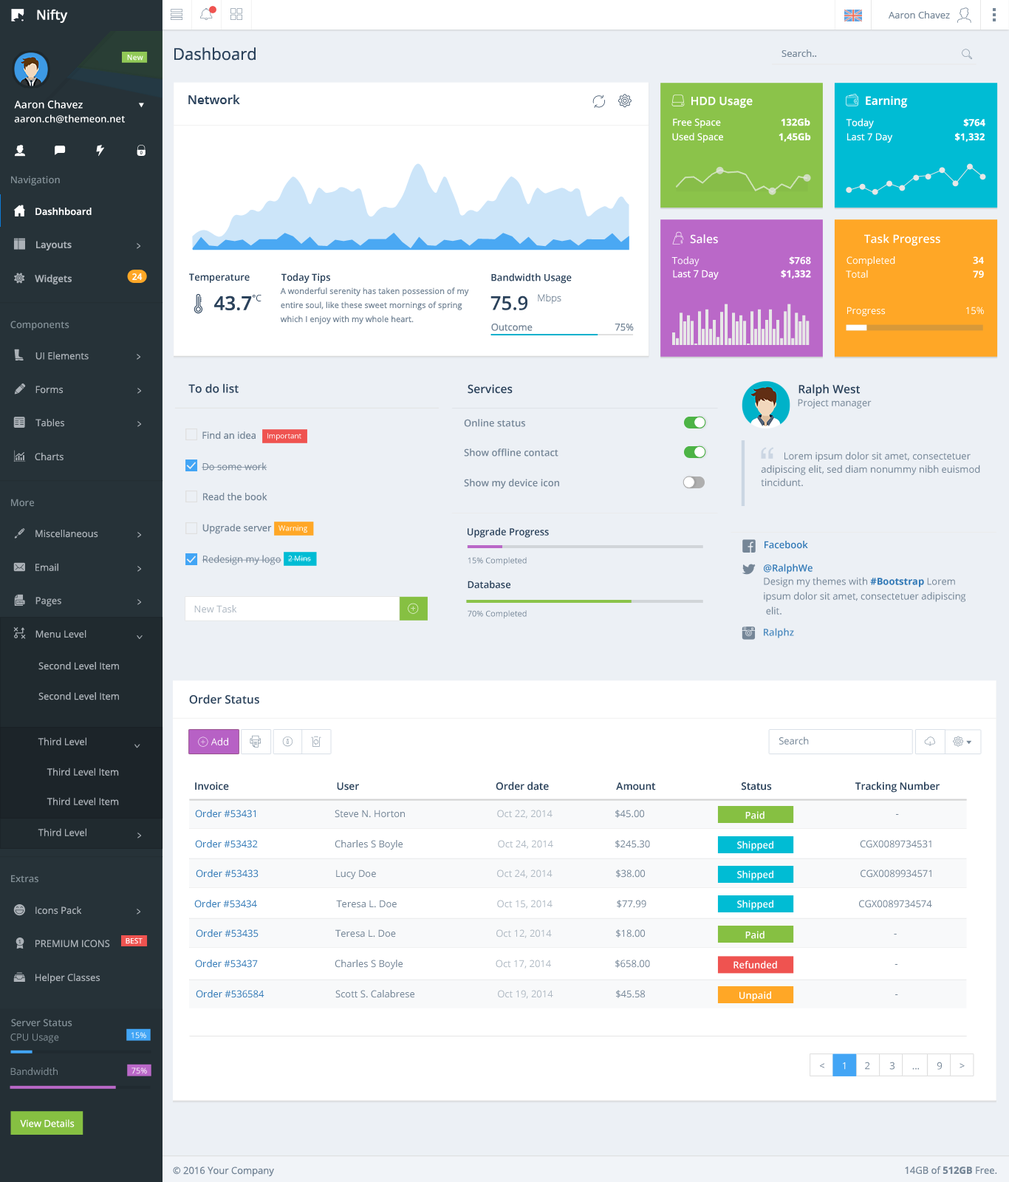
<style>
.page{position:relative;width:1009px;height:1182px;background:#ffffff}
.page>*{position:absolute;margin:0}
.t1{font:13.3px "OpenSans-Semibold";color:#ffffff}
.t2{font:9.6px "OpenSans";color:#758697}
.t3{font:16.3px "OpenSans";color:#2b425b}
.t4{font:7.4px "OpenSans-Semibold";color:#ffffff}
.t5{font:10.3px "OpenSans-Semibold";color:#ffffff}
.t6{font:12.6px "OpenSans-Semibold";color:#2b425b}
.t7{font:11.5px "OpenSans-Semibold";color:#ffffff}
.t8{font:9.6px "OpenSans-Semibold";letter-spacing:0.007em;color:#ffffff}
.t9{font:9.6px "OpenSans";color:#ffffff}
.t10{font:9.6px "OpenSans-Bold";color:#ffffff}
.t11{font:9.6px "OpenSans-Semibold";color:#818e95}
.t12{font:9.6px "OpenSans-Semibold";color:#ffffff}
.t13{font:9.6px "OpenSans-Semibold";color:#abb1b7}
.t14{font:8.9px "OpenSans-Semibold";color:#ffffff}
.t15{font:9.6px "OpenSans-Semibold";color:#2b425b}
.t16{font:8.2px/14px "OpenSans";letter-spacing:0.006em;color:#758697}
.t17{font:9.6px "OpenSans-Light";color:#758697}
.t18{font:19.2px "OpenSans-Semibold";color:#2b425b}
.t19{font:8.9px "OpenSans-Light";color:#2b425b}
.t20{font:9.6px "OpenSans";color:#abb1b7}
.t21{font:11.5px "OpenSans-Semibold";color:#2b425b}
.t22{font:9.6px "OpenSans-Semibold";color:#758697}
.t23{font:7.4px "OpenSans";color:#ffffff}
.t24{font:9.6px/13.3px "OpenSans";color:#758697}
.t25{font:9.6px "OpenSans-Semibold";color:#337ab7}
.t26{font:7.4px "OpenSans"}
.t27{font:8.1px "OpenSans";color:#758697}
.t28{font:9.6px/14.8px "OpenSans";color:#758697}
.t29{font:9.6px/14.8px "OpenSans-Bold";color:#337ab7}
.t30{font:9.6px "OpenSans";color:#afb9c3}
.t31{font:9.6px "OpenSans-Semibold";color:#4d8bbf}
.t32{font:10.1px "OpenSans-Semibold";color:#2b425b}
.t33{font:9.6px "OpenSans";color:#337ab7}
.t34{font:9.6px "OpenSans";color:#818e95}
.t35{font:8.1px "OpenSans";color:#ffffff}
.t36{font:9.6px "OpenSans";letter-spacing:-0.005em;color:#758697}
.t37{font:9.6px "OpenSans";letter-spacing:-0.005em;color:#ffffff}
.t38{font:9.6px "OpenSans-Bold";color:#758697}
</style>
<div class="page">
<p class="t1" style="left:37px;top:9px;width:31px;height:14px">Nifty</p>
<p class="t2" style="left:889px;top:11px;width:61px;height:7px">Aaron Chavez</p>
<p class="t3" style="left:174px;top:47px;width:82px;height:14px">Dashboard</p>
<p class="t2" style="left:781px;top:49px;width:36px;height:8px">Search..</p>
<p class="t4" style="left:127px;top:55px;width:16px;height:6px">New</p>
<p class="t5" style="left:14px;top:100px;width:69px;height:9px">Aaron Chavez</p>
<p class="t6" style="left:188px;top:95px;width:52px;height:9px">Network</p>
<p class="t7" style="left:691px;top:97px;width:62px;height:11px">HDD Usage</p>
<p class="t7" style="left:866px;top:96px;width:42px;height:12px">Earning</p>
<p class="t8" style="left:14px;top:114px;width:111px;height:9px">aaron.ch@themeon.net</p>
<p class="t9" style="left:673px;top:118px;width:137px;height:11px">Free Space                        <span class="t10">132Gb</span></p>
<p class="t9" style="left:846px;top:118px;width:139px;height:11px">Today                                    <span class="t10">$764</span></p>
<p class="t9" style="left:672px;top:132px;width:139px;height:11px">Used Space                      <span class="t10">1,45Gb</span></p>
<p class="t9" style="left:847px;top:132px;width:138px;height:11px">Last 7 Day                         <span class="t10">$1,332</span></p>
<p class="t11" style="left:11px;top:176px;width:49px;height:9px">Navigation</p>
<p class="t12" style="left:35px;top:208px;width:57px;height:8px">Dashhboard</p>
<p class="t13" style="left:36px;top:241px;width:36px;height:9px">Layouts</p>
<p class="t7" style="left:690px;top:234px;width:28px;height:10px">Sales</p>
<p class="t7" style="left:864px;top:234px;width:76px;height:12px">Task Progress</p>
<p class="t9" style="left:671px;top:256px;width:140px;height:11px">Today                                    <span class="t10">$768</span></p>
<p class="t9" style="left:846px;top:256px;width:138px;height:10px">Completed                               <span class="t10">34</span></p>
<p class="t9" style="left:673px;top:270px;width:138px;height:10px">Last 7 Day                         <span class="t10">$1,332</span></p>
<p class="t9" style="left:846px;top:270px;width:138px;height:8px">Total                                          <span class="t10">79</span></p>
<p class="t13" style="left:35px;top:274px;width:37px;height:10px">Widgets</p>
<p class="t14" style="left:132px;top:273px;width:11px;height:7px">24</p>
<p class="t15" style="left:189px;top:273px;width:61px;height:10px">Temperature</p>
<p class="t15" style="left:281px;top:273px;width:49px;height:10px">Today Tips</p>
<p class="t15" style="left:491px;top:273px;width:81px;height:11px">Bandwidth Usage</p>
<p class="t16" style="left:280px;top:287px;width:189px;height:37px">A wonderful serenity has taken possession of my <br>entire soul, like these sweet mornings of spring <br>which I enjoy with my whole heart.</p>
<p class="t17" style="left:538px;top:294px;width:23px;height:10px">Mbps</p>
<p class="t18" style="left:214px;top:295px;width:47px;height:16px">43.7<span class="t19">°C</span></p>
<p class="t18" style="left:490px;top:295px;width:37px;height:15px">75.9</p>
<p class="t9" style="left:847px;top:307px;width:137px;height:9px">Progress                                15%</p>
<p class="t11" style="left:10px;top:321px;width:59px;height:9px">Components</p>
<p class="t2" style="left:491px;top:324px;width:143px;height:7px">Outcome                                 75%</p>
<p class="t20" style="left:35px;top:352px;width:54px;height:8px">UI Elements</p>
<p class="t20" style="left:35px;top:386px;width:29px;height:8px">Forms</p>
<p class="t21" style="left:188px;top:383px;width:51px;height:10px">To do list</p>
<p class="t21" style="left:468px;top:384px;width:45px;height:10px">Services</p>
<p class="t21" style="left:798px;top:384px;width:62px;height:12px">Ralph West</p>
<p class="t2" style="left:798px;top:399px;width:74px;height:9px">Project manager</p>
<p class="t20" style="left:35px;top:419px;width:29px;height:8px">Tables</p>
<p class="t22" style="left:464px;top:419px;width:61px;height:8px">Online status</p>
<p class="t2" style="left:202px;top:431px;width:54px;height:8px">Find an idea</p>
<p class="t23" style="left:267px;top:433px;width:34px;height:7px">Important</p>
<p class="t22" style="left:464px;top:448px;width:94px;height:8px">Show offline contact</p>
<p class="t20" style="left:35px;top:452px;width:29px;height:8px">Charts</p>
<p class="t24" style="left:761px;top:451px;width:219px;height:35px">Lorem ipsum dolor sit amet, consectetuer <br>adipiscing elit, sed diam nonummy nibh euismod <br>tincidunt.</p>
<p class="t2" style="left:202px;top:462px;width:65px;height:9px">Do some work</p>
<p class="t22" style="left:464px;top:479px;width:95px;height:10px">Show my device icon</p>
<p class="t2" style="left:203px;top:493px;width:64px;height:8px">Read the book</p>
<p class="t11" style="left:11px;top:499px;width:23px;height:8px">More</p>
<p class="t20" style="left:35px;top:530px;width:63px;height:8px">Miscellaneous</p>
<p class="t2" style="left:202px;top:524px;width:70px;height:10px">Upgrade server</p>
<p class="t23" style="left:278px;top:525px;width:29px;height:8px">Warning</p>
<p class="t15" style="left:468px;top:527px;width:81px;height:11px">Upgrade Progress</p>
<p class="t25" style="left:764px;top:541px;width:44px;height:8px">Facebook</p>
<p class="t2" style="left:202px;top:555px;width:79px;height:10px">Redesign my logo</p>
<p class="t26" style="left:288px;top:555px;width:23px;height:6px">2 Mins</p>
<p class="t27" style="left:468px;top:557px;width:59px;height:9px">15% Completed</p>
<p class="t20" style="left:35px;top:563px;width:23px;height:8px">Email</p>
<p class="t25" style="left:764px;top:564px;width:49px;height:10px">@RalphWe</p>
<p class="t15" style="left:468px;top:581px;width:42px;height:8px">Database</p>
<p class="t28" style="left:764px;top:577px;width:202px;height:38px">Design my themes with <span class="t29">#Bootstrap</span> Lorem <br>ipsum dolor sit amet, consectetuer adipiscing<br> elit.</p>
<p class="t20" style="left:35px;top:597px;width:26px;height:9px">Pages</p>
<p class="t30" style="left:194px;top:605px;width:43px;height:8px">New Task</p>
<p class="t27" style="left:468px;top:610px;width:59px;height:9px">70% Completed</p>
<p class="t31" style="left:764px;top:628px;width:30px;height:10px">Ralphz</p>
<p class="t20" style="left:35px;top:630px;width:51px;height:8px">Menu Level</p>
<p class="t20" style="left:38px;top:662px;width:81px;height:8px">Second Level Item</p>
<p class="t20" style="left:38px;top:692px;width:81px;height:8px">Second Level Item</p>
<p class="t21" style="left:189px;top:694px;width:70px;height:10px">Order Status</p>
<p class="t20" style="left:38px;top:737px;width:48px;height:8px">Third Level</p>
<p class="t9" style="left:211px;top:737px;width:17px;height:8px">Add</p>
<p class="t2" style="left:779px;top:736px;width:30px;height:9px">Search</p>
<p class="t20" style="left:47px;top:767px;width:72px;height:9px">Third Level Item</p>
<p class="t32" style="left:195px;top:781px;width:745px;height:12px">Invoice                                    User                                              Order date                     Amount                            Status                               Tracking Number</p>
<p class="t20" style="left:47px;top:797px;width:72px;height:8px">Third Level Item</p>
<p class="t2" style="left:195px;top:810px;width:704px;height:8px"><span class="t33">Order #53431</span>                          Steve N. Horton                           <span class="t30">Oct 22, 2014</span>                     $45.00                                                                                           -</p>
<p class="t12" style="left:745px;top:811px;width:19px;height:8px">Paid</p>
<p class="t20" style="left:38px;top:828px;width:48px;height:8px">Third Level</p>
<p class="t2" style="left:195px;top:840px;width:736px;height:9px"><span class="t33">Order #53432</span>                          Charles S Boyle                                      <span class="t30">Oct 24, 2014</span>                     $245.30                                                                                    CGX0089734531</p>
<p class="t12" style="left:737px;top:841px;width:36px;height:10px">Shipped</p>
<p class="t2" style="left:196px;top:869px;width:735px;height:10px"><span class="t33">Order #53433</span>                          Lucy Doe                                                <span class="t30">Oct 24, 2014 </span>                    $38.00                                                                                      CGX0089934571</p>
<p class="t11" style="left:11px;top:875px;width:27px;height:8px">Extras</p>
<p class="t12" style="left:737px;top:870px;width:36px;height:10px">Shipped</p>
<p class="t2" style="left:194px;top:900px;width:738px;height:9px"><span class="t33">Order #53434</span>                           Teresa L. Doe                                        <span class="t30">Oct 15, 2014</span>                      $77.99                                                                                     CGX0089734574</p>
<p class="t12" style="left:737px;top:900px;width:36px;height:10px">Shipped</p>
<p class="t20" style="left:35px;top:906px;width:47px;height:8px">Icons Pack</p>
<p class="t2" style="left:196px;top:929px;width:701px;height:9px"><span class="t33">Order #53435</span>                          Teresa L. Doe                                        <span class="t30">Oct 12, 2014</span>                     $18.00                                                                                                    -</p>
<p class="t20" style="left:35px;top:940px;width:75px;height:7px">PREMIUM ICONS</p>
<p class="t23" style="left:126px;top:937px;width:17px;height:7px">BEST</p>
<p class="t12" style="left:745px;top:931px;width:19px;height:8px">Paid</p>
<p class="t2" style="left:195px;top:959px;width:702px;height:10px"><span class="t33">Order #53437 </span>                         Charles S Boyle                                     <span class="t30">Oct 17, 2014 </span>                    $658.00                                                                                                  -</p>
<p class="t12" style="left:733px;top:960px;width:44px;height:8px">Refunded</p>
<p class="t20" style="left:35px;top:973px;width:65px;height:10px">Helper Classes</p>
<p class="t2" style="left:196px;top:990px;width:702px;height:9px"><span class="t33">Order #536584</span>                         Scott S. Calabrese                                 <span class="t30">Oct 19, 2014</span>                     $45.58                                                                                                    -</p>
<p class="t12" style="left:739px;top:991px;width:32px;height:10px">Unpaid</p>
<p class="t11" style="left:11px;top:1019px;width:61px;height:8px">Server Status</p>
<p class="t34" style="left:10px;top:1033px;width:49px;height:10px">CPU Usage</p>
<p class="t35" style="left:131px;top:1032px;width:15px;height:7px">15%</p>
<p class="t36" style="left:820px;top:1061px;width:145px;height:9px">&lt;       <span class="t37">1</span>       2        3       ...       9       &gt;</p>
<p class="t34" style="left:10px;top:1067px;width:48px;height:8px">Bandwidth</p>
<p class="t35" style="left:131px;top:1067px;width:16px;height:7px">75%</p>
<p class="t9" style="left:20px;top:1119px;width:55px;height:8px">View Details</p>
<p class="t2" style="left:173px;top:1166px;width:101px;height:11px">© 2016 Your Company</p>
<p class="t2" style="left:905px;top:1166px;width:92px;height:8px">14GB of <span class="t38">512GB</span> Free.</p>
</div>
